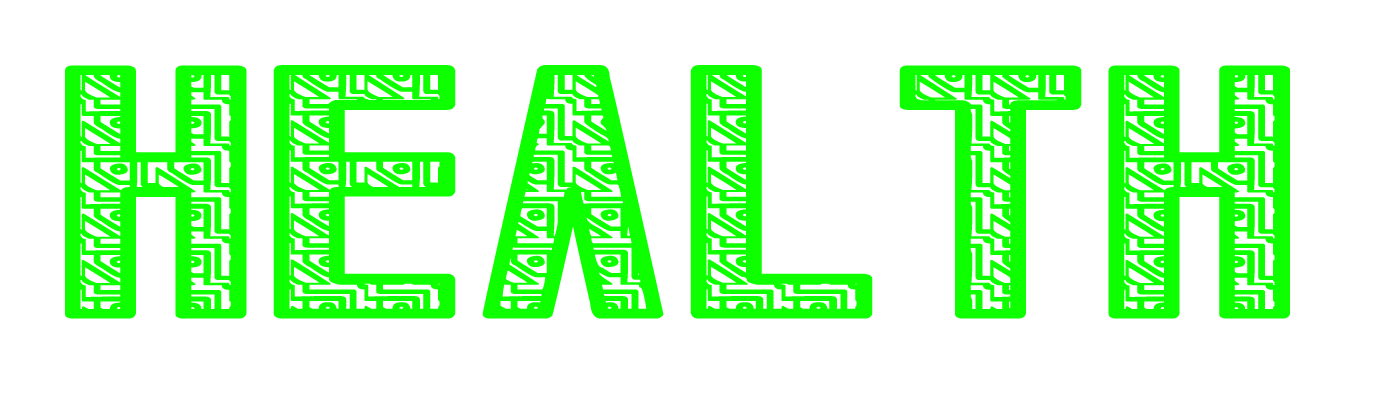
<style>
.page{position:relative;width:1400px;height:400px;background:#ffffff}
.page>*{position:absolute;margin:0}
.t1{font:237.5px "CalenduliaSt";color:#0dff00;scale:1.59 1}
</style>
<div class="page">
<p class="t1" style="left:65px;top:65px;width:1225px;height:254px">HEALTH</p>
</div>
